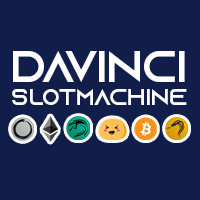
<style>
.page{position:relative;width:200px;height:200px;background:#111e4a}
.page>*{position:absolute;margin:0}
.t1{font:44px "AzonixRegular";color:#ffffff;text-transform:uppercase}
.t2{font:22.9px "AzonixRegular";color:#ffffff;text-transform:uppercase}
</style>
<div class="page">
<p class="t1" style="left:13px;top:51px;width:172px;height:31px">DAVINCI</p>
<p class="t2" style="left:12px;top:89px;width:175px;height:16px">SLOTMACHINE</p>
</div>
